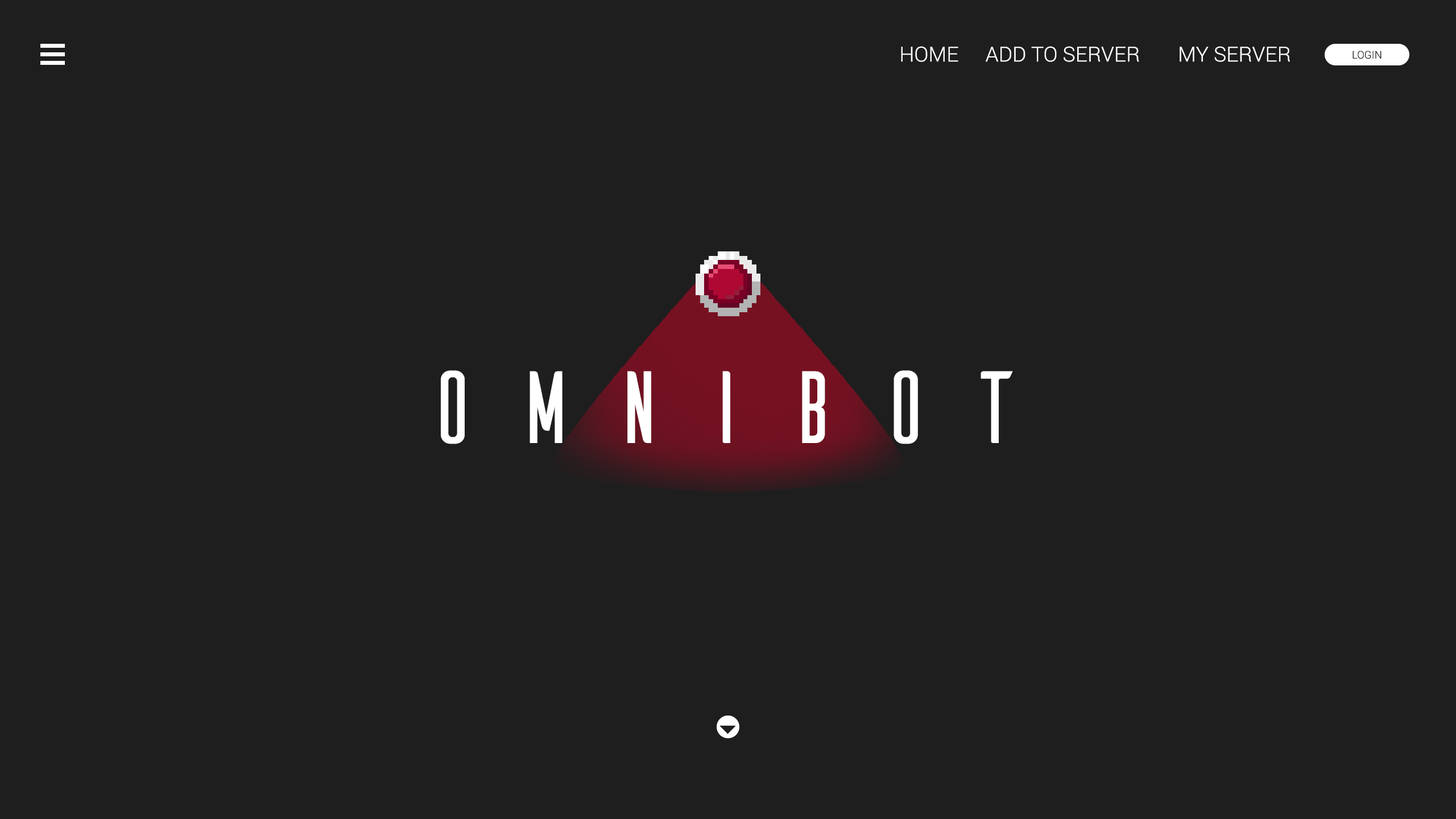
<style>
.page{position:relative;width:1456px;height:819px;background:#1e1e1e}
.page>*{position:absolute;margin:0}
.t1{font:20.7px "Roboto-Light";color:#ffffff}
.t2{font:10.6px "Roboto-Light";color:#1e1e1e}
.t3{font:102.2px "Ailerons-Regular";letter-spacing:0.3em;color:#ffffff}
</style>
<div class="page">
<p class="t1" style="left:901px;top:46px;width:57px;height:16px">HOME</p>
<p class="t1" style="left:986px;top:46px;width:153px;height:16px">ADD TO SERVER</p>
<p class="t1" style="left:1180px;top:46px;width:110px;height:16px">MY SERVER</p>
<p class="t2" style="left:1352px;top:51px;width:29px;height:8px">LOGIN</p>
<p class="t3" style="left:441px;top:370px;width:572px;height:74px">omnibot</p>
</div>
